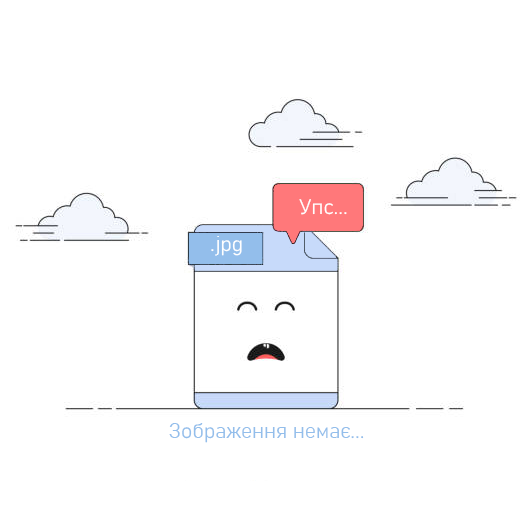
<style>
.page{position:relative;width:532px;height:518px;background:#ffffff}
.page>*{position:absolute;margin:0}
.t1{font:20.8px "Bahnschrift-Light";color:#ffffff}
.t2{font:20.8px "Bahnschrift-Light";color:#93beeb}
</style>
<div class="page">
<p class="t1" style="left:299px;top:199px;width:48px;height:16px">Упс...</p>
<p class="t1" style="left:211px;top:236px;width:31px;height:20px">.jpg</p>
<p class="t2" style="left:169px;top:423px;width:195px;height:20px">Зображення немає...</p>
</div>
